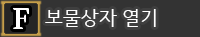
<style>
.page{position:relative;width:200px;height:37px;background:#333333}
.page>*{position:absolute;margin:0}
.t1{font:18.7px "HCRDotum";color:#ffffff}
</style>
<div class="page">
<p class="t1" style="left:45px;top:9px;width:111px;height:18px">보물상자 열기</p>
</div>
